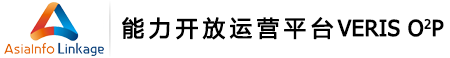
<style>
.page{position:relative;width:450px;height:58px;background:#ffffff}
.page>*{position:absolute;margin:0}
.t1{font:22px "MicrosoftYaHei";letter-spacing:0.2em;color:#000000;font-weight:bold}
.t2{font:22px "Tahoma";color:#000000;font-weight:bold}
.t3{font:22px "Tahoma";letter-spacing:0.05em;color:#000000;font-weight:bold}
</style>
<div class="page">
<p class="t1" style="left:122px;top:17px;width:322px;height:23px">能力开放运营平台<span class="t2">VERIS O2</span><span class="t3">P</span></p>
</div>
